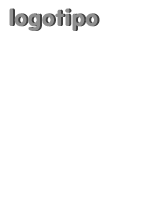
<style>
.page{position:relative;width:150px;height:200px;background:#ffffff}
.page>*{position:absolute;margin:0}
.t1{font:24px "VAGRound";color:#8e8e8e}
</style>
<div class="page">
<p class="t1" style="left:9px;top:8px;width:89px;height:23px">logotipo</p>
</div>
